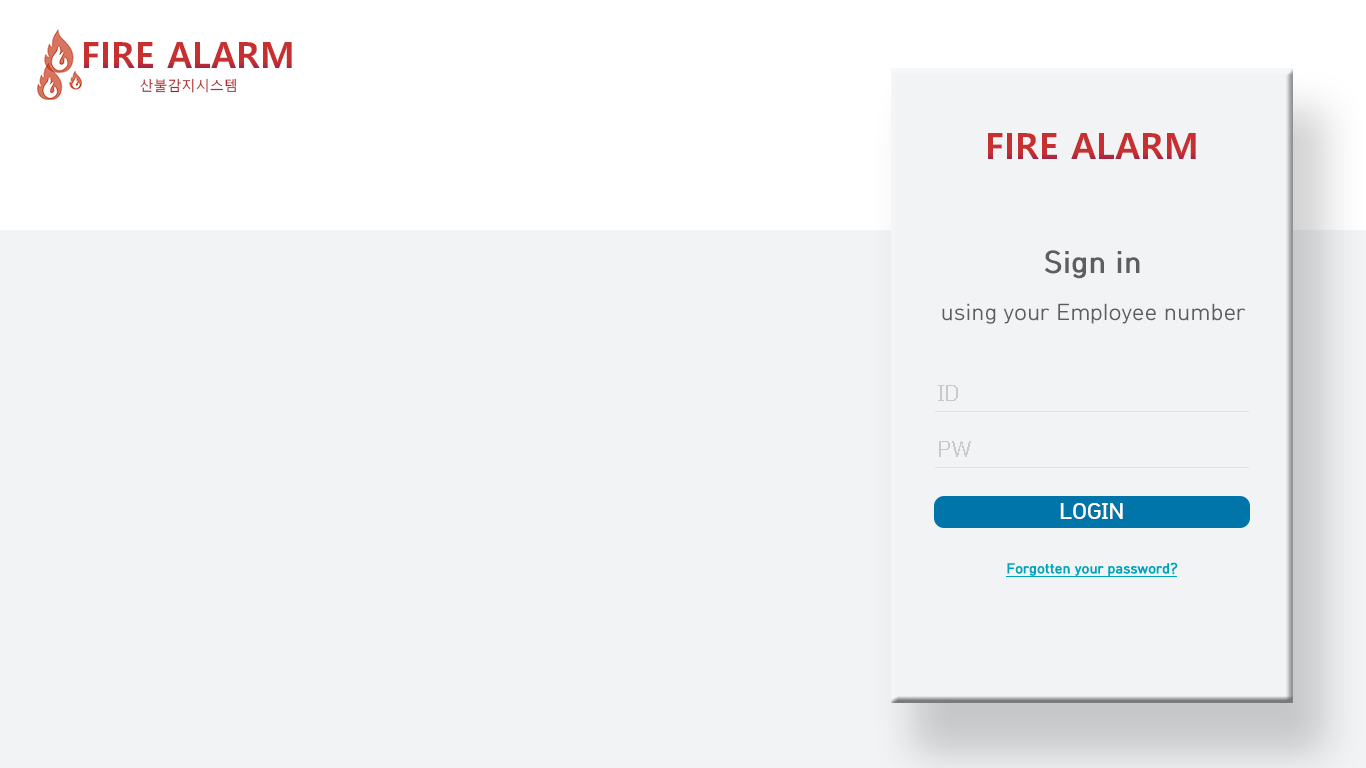
<style>
.page{position:relative;width:1366px;height:768px;background:#f1f3f5}
.page>*{position:absolute;margin:0}
.t1{font:36px "MalgunGothicBold";color:#c73030}
.t2{font:14px "MalgunGothic";color:#b32b2b}
.t3{font:22.2px "HCRDotum";color:#5e5e5e}
.t4{font:30.5px "HCRDotum-Bold";color:#5e5e5e}
.t5{font:22.2px "HCRDotum";color:#cacaca}
</style>
<div class="page">
<p class="t1" style="left:84px;top:42px;width:208px;height:26px">FIRE ALARM</p>
<p class="t2" style="left:140px;top:78px;width:96px;height:15px">산불감지시스템</p>
<p class="t1" style="left:988px;top:133px;width:208px;height:26px">FIRE ALARM</p>
<p class="t3" style="left:942px;top:250px;width:304px;height:74px;text-align:center"><span class="t4">Sign in<br></span>using your Employee number</p>
<p class="t5" style="left:938px;top:385px;width:20px;height:16px">ID</p>
<p class="t5" style="left:939px;top:441px;width:32px;height:16px">PW</p>
</div>
